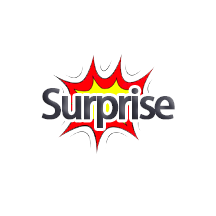
<style>
.page{position:relative;width:216px;height:216px;background:#ffffff}
.page>*{position:absolute;margin:0}
.t1{font:40px "AdobeHeitiStd-Regular";letter-spacing:-0.075em;color:#3e3e4a;font-weight:bold}
</style>
<div class="page">
<p class="t1" style="left:41px;top:88px;width:134px;height:40px">Surprise</p>
</div>
